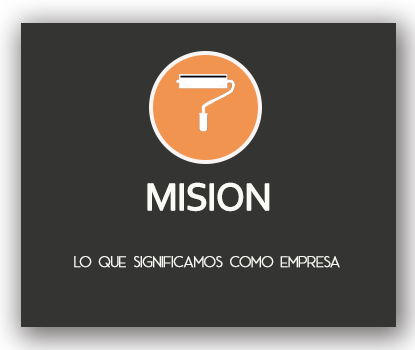
<style>
.page{position:relative;width:415px;height:350px;background:#343433}
.page>*{position:absolute;margin:0}
.t1{font:40px "Corbel";letter-spacing:-0.05em;color:#f9f9f5;font-weight:bold}
.t2{font:16px "AceSansDemo";letter-spacing:-0.05em;color:#f9f9f5;font-weight:bold}
</style>
<div class="page">
<p class="t1" style="left:147px;top:182px;width:123px;height:30px">MISION</p>
<p class="t2" style="left:74px;top:256px;width:266px;height:12px">LO QUE SIGNIFICAMOS COMO EMPRESA</p>
</div>
